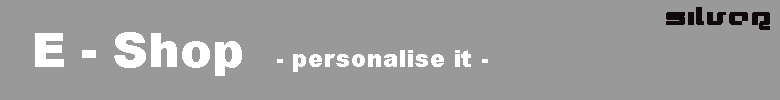
<style>
.page{position:relative;width:780px;height:100px;background:#999999}
.page>*{position:absolute;margin:0}
.t1{font:24px "Xeron";color:#100909}
.t2{font:24px "Arial-Black";color:#ffffff}
.t3{font:48px "Arial-Black";color:#ffffff}
</style>
<div class="page">
<p class="t1" style="left:666px;top:7px;width:104px;height:23px">SILVER</p>
<p class="t2" style="left:35px;top:32px;width:453px;height:44px"><span class="t3">E - Shop  </span>- personalise it -</p>
</div>
